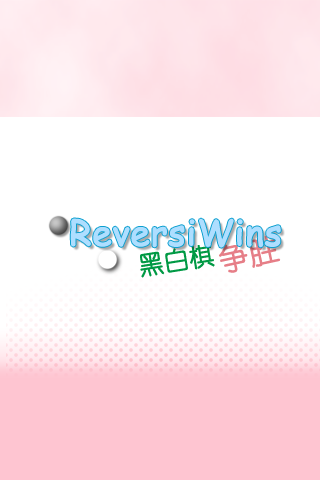
<style>
.page{position:relative;width:320px;height:480px;background:#ffffff}
.page>*{position:absolute;margin:0}
.t1{font:35.1px "ComicSansMS";color:#aedeff;font-weight:bold}
.t2{font:24.8px "YouYuan";color:#009944;font-weight:bold}
.t3{font:30px "YouYuan";color:#e67e87;font-weight:bold}
</style>
<div class="page">
<p class="t1" style="left:70px;top:218px;width:211px;height:30px">ReversiWins</p>
<p class="t2" style="left:140px;top:243px;width:75px;height:35px;rotate:-9deg">黑白棋</p>
<p class="t3" style="left:219px;top:235px;width:62px;height:38px;rotate:-12deg">争胜</p>
</div>
